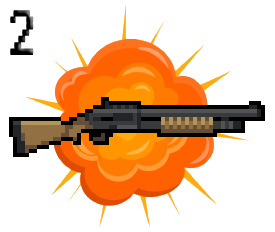
<style>
.page{position:relative;width:275px;height:232px;background:#ffffff}
.page>*{position:absolute;margin:0}
.t1{font:80px "VT323-Regular";color:#000000}
.t2{font:24px "DelaGothicOne-Regular";color:#000000}
</style>
<div class="page">
<p class="t1" style="left:10px;top:10px;width:24px;height:45px"><span class="t2"><br></span>2</p>
</div>
